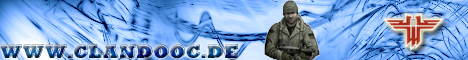
<style>
.page{position:relative;width:468px;height:60px}
.page>*{position:absolute;margin:0}
.t1{font:18px "HangbordDSG"}
</style>
<div class="page">
<p class="t1" style="left:0px;top:44px;width:238px;height:14px">WWW.Clandooc.de</p>
</div>
